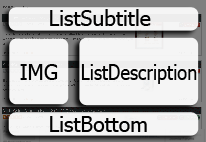
<style>
.page{position:relative;width:206px;height:142px;background:#f5f5f5}
.page>*{position:absolute;margin:0}
.t1{font:21.2px "Tahoma";color:#010101}
.t2{font:21.2px "Tahoma";color:#010101;scale:0.86 1}
</style>
<div class="page">
<p class="t1" style="left:50px;top:9px;width:101px;height:17px">ListSubtitle</p>
<p class="t1" style="left:20px;top:64px;width:38px;height:16px">IMG</p>
<p class="t2" style="left:81px;top:64px;width:116px;height:20px">ListDescription</p>
<p class="t1" style="left:50px;top:116px;width:97px;height:16px">ListBottom</p>
</div>
